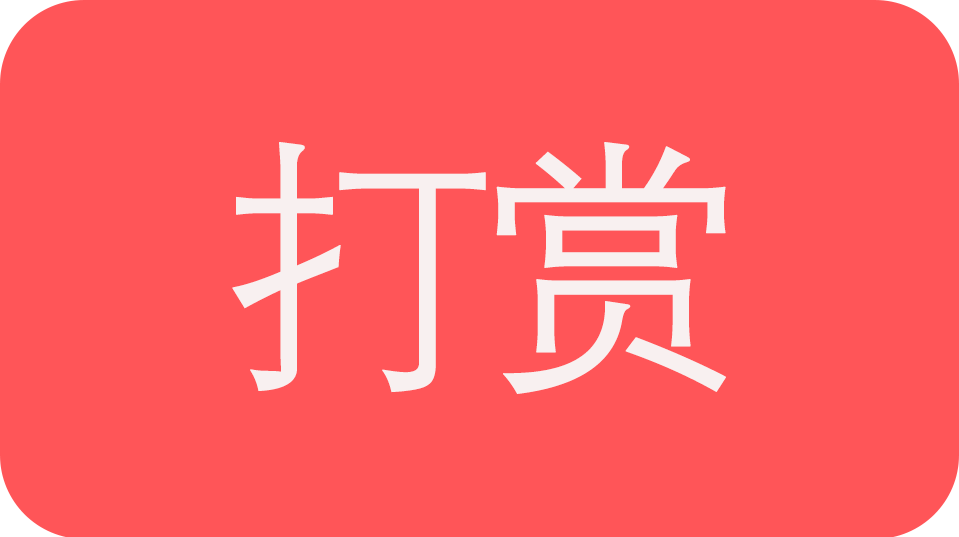
<style>
.page{position:relative;width:959px;height:537px;background:#ff5558}
.page>*{position:absolute;margin:0}
.t1{font:271.1px "DengXian";letter-spacing:-0.1em;color:#f8f0f0;font-weight:bold}
</style>
<div class="page">
<p class="t1" style="left:232px;top:142px;width:494px;height:252px">打赏</p>
</div>
